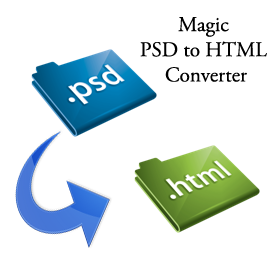
<style>
.page{position:relative;width:273px;height:273px;background:#ffffff}
.page>*{position:absolute;margin:0}
.t1{font:21px "AGaramondPro-Regular";color:#000000}
</style>
<div class="page">
<p class="t1" style="left:140px;top:17px;width:127px;height:65px;text-align:center">Magic <br>PSD to HTML <br>Converter</p>
</div>
